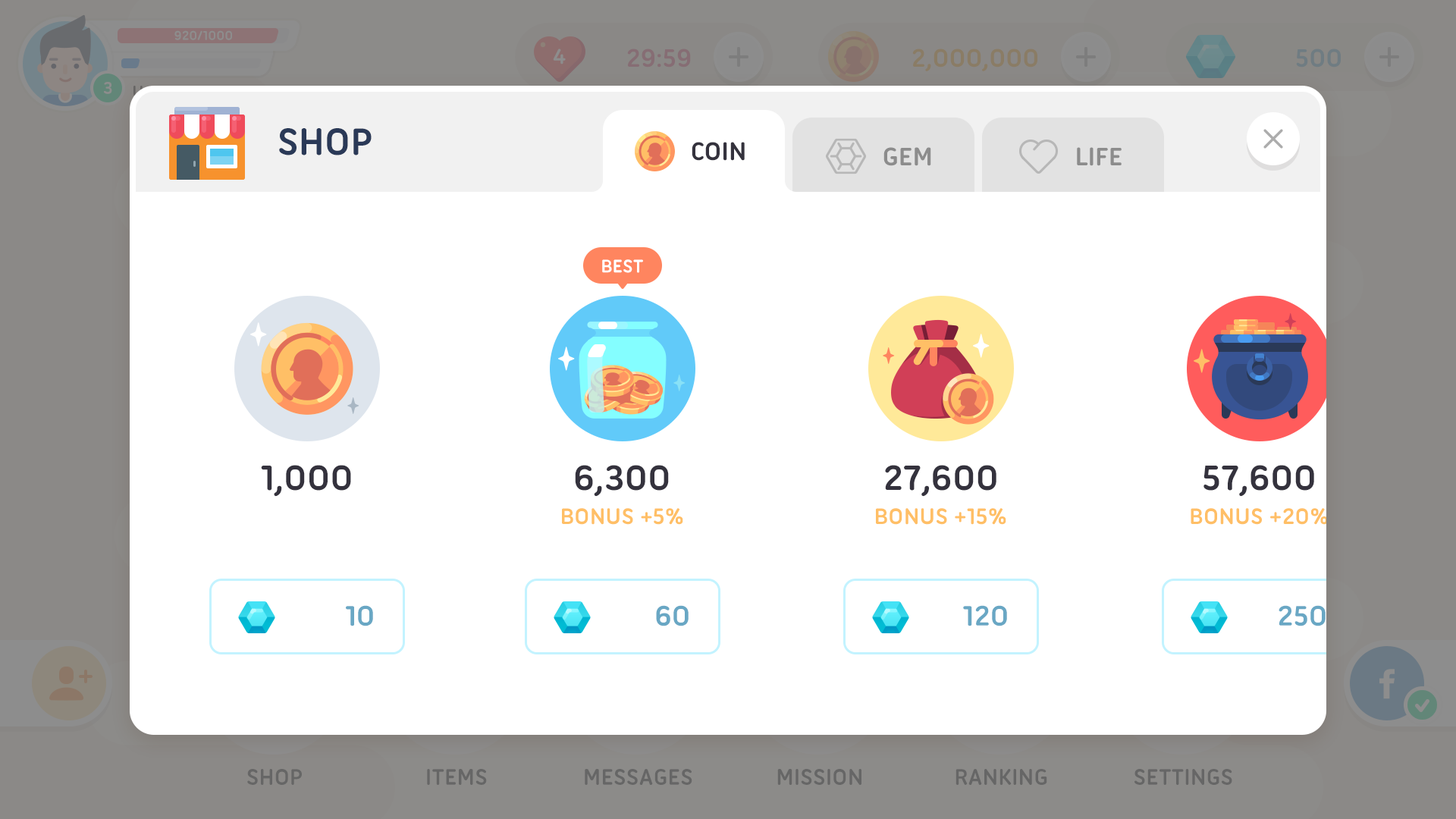
<style>
.page{position:relative;width:1456px;height:819px;background:#ffffff}
.page>*{position:absolute;margin:0}
.t1{font:40.9px "UbuntuTitling-Bold";color:#2a3957;text-transform:uppercase}
.t2{font:27.3px "UbuntuTitling-Bold";color:#34323d;text-transform:uppercase}
.t3{font:27.3px "UbuntuTitling-Bold";color:#8c8c8c;text-transform:uppercase}
.t4{font:19.7px "UbuntuTitling-Bold";color:#ffffff;text-transform:uppercase}
.t5{font:37.9px "UbuntuTitling-Bold";color:#34323d;text-transform:uppercase}
.t6{font:24.3px "UbuntuTitling-Bold";color:#ffbf66;text-transform:uppercase}
.t7{font:30.3px "UbuntuTitling-Bold";color:#69a7c4;text-transform:uppercase}
</style>
<div class="page">
<p class="t1" style="left:279px;top:128px;width:93px;height:27px">shop</p>
<p class="t2" style="left:692px;top:142px;width:53px;height:19px">coin</p>
<p class="t3" style="left:883px;top:147px;width:48px;height:19px">gem</p>
<p class="t3" style="left:1077px;top:147px;width:45px;height:19px">life</p>
<p class="t4" style="left:602px;top:259px;width:41px;height:14px">Best</p>
<p class="t5" style="left:261px;top:465px;width:90px;height:32px">1,000</p>
<p class="t5" style="left:575px;top:465px;width:94px;height:32px">6,300</p>
<p class="t5" style="left:885px;top:465px;width:111px;height:32px">27,600</p>
<p class="t5" style="left:1203px;top:465px;width:111px;height:32px">57,600</p>
<p class="t6" style="left:562px;top:508px;width:121px;height:17px">bonus +5%</p>
<p class="t6" style="left:876px;top:508px;width:130px;height:17px">bonus +15%</p>
<p class="t6" style="left:1191px;top:508px;width:137px;height:17px">bonus +20%</p>
<p class="t7" style="left:346px;top:605px;width:27px;height:21px">10</p>
<p class="t7" style="left:656px;top:605px;width:33px;height:21px">60</p>
<p class="t7" style="left:963px;top:605px;width:44px;height:21px">120</p>
<p class="t7" style="left:1279px;top:605px;width:47px;height:21px">250</p>
</div>
